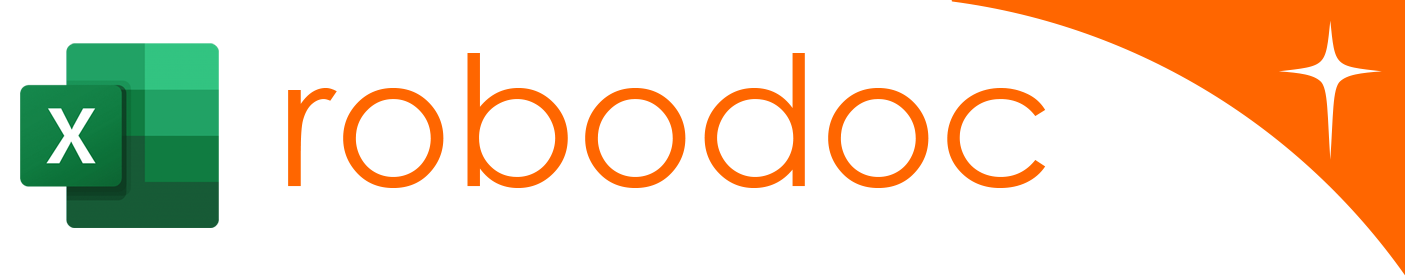
<style>
.page{position:relative;width:1405px;height:276px;background:#ffffff}
.page>*{position:absolute;margin:0}
.t1{font:181.4px "CenturyGothic";color:#ff6600}
</style>
<div class="page">
<p class="t1" style="left:288px;top:53px;width:758px;height:135px">robodoc</p>
</div>
